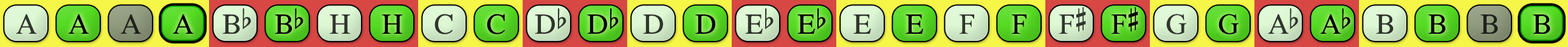
<style>
.page{position:relative;width:1568px;height:47px}
.page>*{position:absolute;margin:0}
.t1{font:29.2px "OpusChords";color:#2f352d}
.t2{font:29.2px "OpusChords";color:#000000}
.t3{font:29.2px "OpusChords";color:#1e211b}
.t4{font:29.2px "OpusChords";color:#30352d}
.t5{font:29.2px "OpusChords";color:#30362e}
.t6{font:29.2px "OpusChords";letter-spacing:-0.05em;color:#2f352d}
.t7{font:29.2px "OpusChords";letter-spacing:-0.05em;color:#000000}
.t8{font:29.2px "OpusChords";color:#1f211b}
</style>
<div class="page">
<p class="t1" style="left:16px;top:14px;width:20px;height:20px">A</p>
<p class="t2" style="left:68px;top:14px;width:21px;height:20px">A</p>
<p class="t3" style="left:120px;top:14px;width:21px;height:20px">A</p>
<p class="t2" style="left:173px;top:14px;width:20px;height:20px">A</p>
<p class="t4" style="left:222px;top:9px;width:29px;height:25px">Bb</p>
<p class="t2" style="left:275px;top:9px;width:28px;height:25px">Bb</p>
<p class="t4" style="left:329px;top:15px;width:21px;height:19px">H</p>
<p class="t2" style="left:382px;top:15px;width:20px;height:19px">H</p>
<p class="t5" style="left:435px;top:14px;width:18px;height:21px">C</p>
<p class="t2" style="left:487px;top:14px;width:18px;height:21px">C</p>
<p class="t1" style="left:535px;top:9px;width:31px;height:25px">Db</p>
<p class="t2" style="left:587px;top:9px;width:32px;height:25px">Db</p>
<p class="t1" style="left:643px;top:15px;width:20px;height:19px">D</p>
<p class="t2" style="left:695px;top:15px;width:20px;height:19px">D</p>
<p class="t4" style="left:745px;top:9px;width:29px;height:25px">Eb</p>
<p class="t2" style="left:797px;top:9px;width:29px;height:25px">Eb</p>
<p class="t5" style="left:853px;top:15px;width:18px;height:19px">E</p>
<p class="t2" style="left:906px;top:15px;width:17px;height:19px">E</p>
<p class="t5" style="left:959px;top:15px;width:15px;height:19px">F</p>
<p class="t2" style="left:1011px;top:15px;width:15px;height:19px">F</p>
<p class="t4" style="left:1059px;top:7px;width:27px;height:27px">F#</p>
<p class="t2" style="left:1111px;top:7px;width:27px;height:27px">F#</p>
<p class="t1" style="left:1166px;top:14px;width:20px;height:21px">G</p>
<p class="t2" style="left:1219px;top:14px;width:20px;height:21px">G</p>
<p class="t6" style="left:1268px;top:9px;width:30px;height:25px">Ab</p>
<p class="t7" style="left:1320px;top:9px;width:30px;height:25px">Ab</p>
<p class="t4" style="left:1376px;top:15px;width:18px;height:19px">B</p>
<p class="t2" style="left:1428px;top:15px;width:18px;height:19px">B</p>
<p class="t8" style="left:1480px;top:15px;width:18px;height:19px">B</p>
<p class="t2" style="left:1533px;top:15px;width:17px;height:19px">B</p>
</div>
